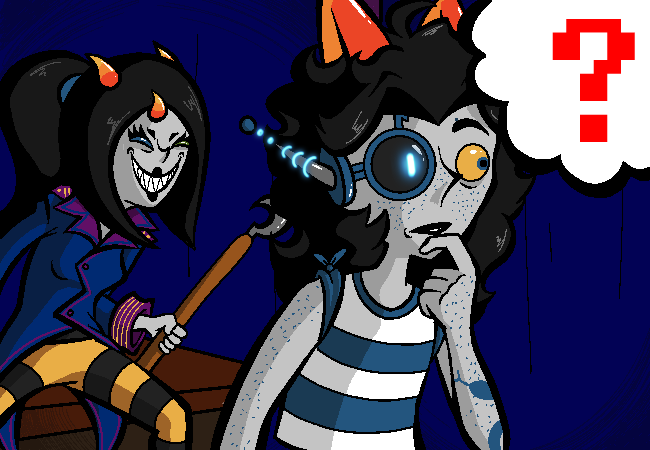
<style>
.page{position:relative;width:650px;height:450px;background:#020255}
.page>*{position:absolute;margin:0}
.t1{font:175px "Fixedsys";color:#ff0000}
</style>
<div class="page">
<p class="t1" style="left:552px;top:19px;width:83px;height:123px">?</p>
</div>
